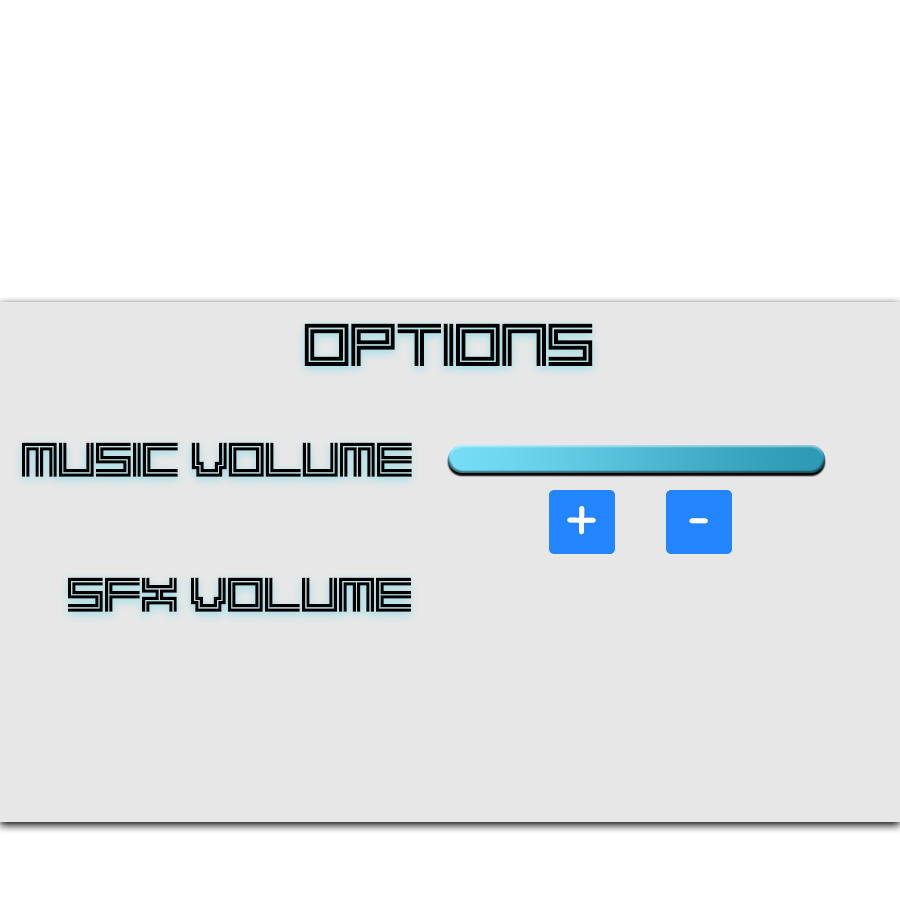
<style>
.page{position:relative;width:900px;height:900px;background:#e7e7e7}
.page>*{position:absolute;margin:0}
.t1{font:60px "2Lines";color:#000000}
.t2{font:48px "2Lines";color:#000000}
</style>
<div class="page">
<p class="t1" style="left:304px;top:323px;width:289px;height:43px">Options</p>
<p class="t2" style="left:22px;top:442px;width:390px;height:35px">Music Volume</p>
<p class="t2" style="left:68px;top:577px;width:343px;height:35px">SFX Volume</p>
</div>
